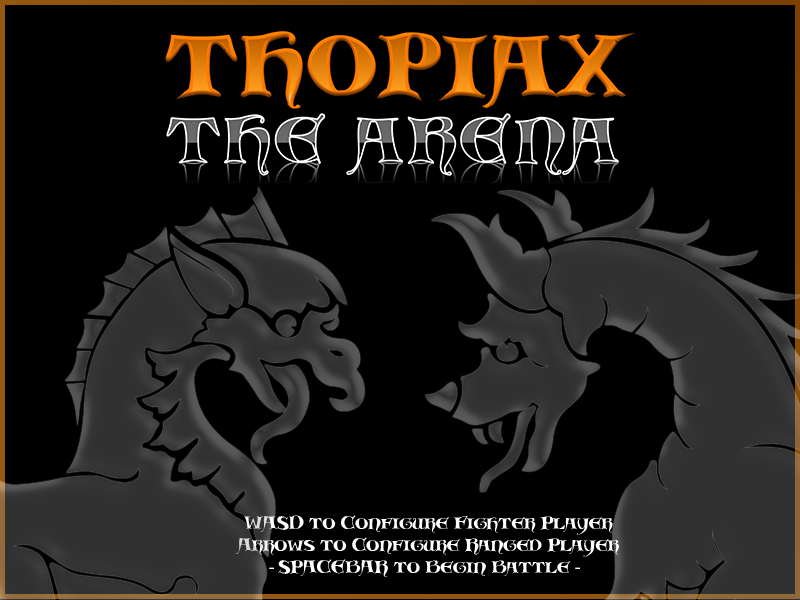
<style>
.page{position:relative;width:800px;height:600px;background:#000000}
.page>*{position:absolute;margin:0}
.t1{font:18.2px "Scribish";color:#ffffff}
.t2{font:18.2px "MyriadPro-Regular";color:#ffffff}
</style>
<div class="page">
<p class="t1" style="left:236px;top:515px;width:383px;height:62px;text-align:center">WASD to Configure Fighter Player<br>Arrows to Configure Ranged Player<br> <span class="t2">- </span>SPACEBAR to Begin Battle <span class="t2">- </span>!</p>
</div>
